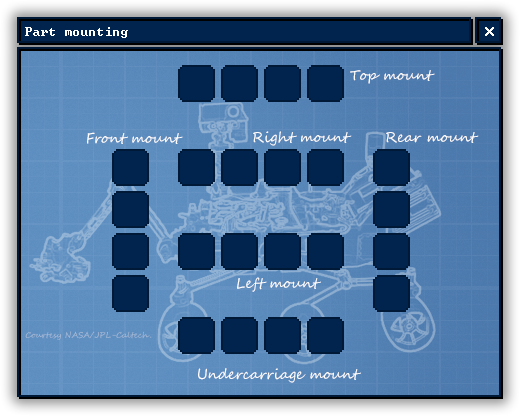
<style>
.page{position:relative;width:520px;height:416px}
.page>*{position:absolute;margin:0}
.t1{font:12px "Terminal";color:#ffffff}
.t2{font:16px "Terminal";color:#ffffff}
.t3{font:14px "SegoeScript";color:#ffffff}
</style>
<div class="page">
<p class="t1" style="left:25px;top:27px;width:103px;height:11px">Part mounting</p>
<p class="t1" style="left:25px;top:27px;width:103px;height:11px">Part mounting</p>
<p class="t2" style="left:485px;top:27px;width:9px;height:9px">x</p>
<p class="t2" style="left:485px;top:27px;width:9px;height:9px">x</p>
<p class="t3" style="left:350px;top:70px;width:85px;height:14px">Top mount</p>
<p class="t3" style="left:87px;top:132px;width:96px;height:12px">Front mount</p>
<p class="t3" style="left:253px;top:131px;width:99px;height:15px">Right mount</p>
<p class="t3" style="left:386px;top:132px;width:93px;height:11px">Rear mount</p>
<p class="t3" style="left:237px;top:277px;width:84px;height:15px">Left mount</p>
<p class="t3" style="left:198px;top:368px;width:163px;height:15px">Undercarriage mount</p>
</div>
